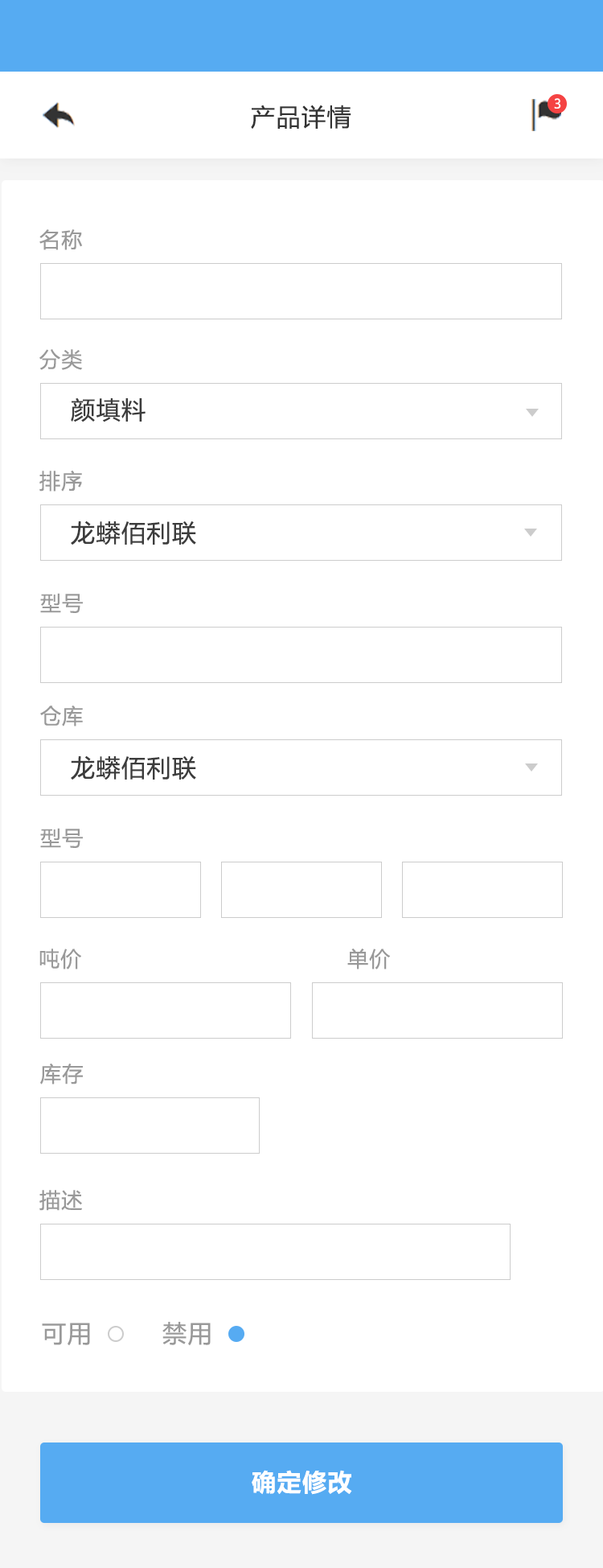
<style>
.page{position:relative;width:603px;height:1568px;background:#ffffff}
.page>*{position:absolute;margin:0}
.t1{font:12.9px "MicrosoftYaHeiUI";color:#ffffff}
.t2{font:24.1px "MicrosoftYaHeiUI";letter-spacing:0.05em;color:#333333}
.t3{font:20.9px "MicrosoftYaHeiUI";letter-spacing:0.05em;color:#999999}
.t4{font:24.1px "MicrosoftYaHeiUI";letter-spacing:0.05em;color:#3c3c3c}
.t5{font:24.1px "MicrosoftYaHeiUI";letter-spacing:0.05em;color:#999999}
.t6{font:24.1px "MicrosoftYaHeiUI-Bold";letter-spacing:0.05em;color:#ffffff}
</style>
<div class="page">
<p class="t1" style="left:554px;top:98px;width:8px;height:11px">3</p>
<p class="t2" style="left:251px;top:105px;width:101px;height:24px">产品详情</p>
<p class="t3" style="left:39px;top:229px;width:44px;height:21px">名称</p>
<p class="t3" style="left:39px;top:349px;width:44px;height:21px">分类</p>
<p class="t4" style="left:71px;top:397px;width:75px;height:25px">颜填料</p>
<p class="t3" style="left:39px;top:471px;width:43px;height:21px">排序</p>
<p class="t4" style="left:71px;top:521px;width:125px;height:24px">龙蟒佰利联</p>
<p class="t3" style="left:40px;top:593px;width:43px;height:20px">型号</p>
<p class="t3" style="left:40px;top:705px;width:43px;height:21px">仓库</p>
<p class="t4" style="left:71px;top:755px;width:125px;height:25px">龙蟒佰利联</p>
<p class="t3" style="left:40px;top:828px;width:43px;height:20px">型号</p>
<p class="t3" style="left:39px;top:949px;width:42px;height:20px">吨价</p>
<p class="t3" style="left:348px;top:949px;width:42px;height:20px">单价</p>
<p class="t3" style="left:40px;top:1063px;width:43px;height:21px">库存</p>
<p class="t3" style="left:39px;top:1190px;width:43px;height:21px">描述</p>
<p class="t5" style="left:42px;top:1323px;width:48px;height:23px">可用</p>
<p class="t5" style="left:163px;top:1322px;width:48px;height:24px">禁用</p>
<p class="t6" style="left:252px;top:1470px;width:100px;height:25px">确定修改</p>
</div>
